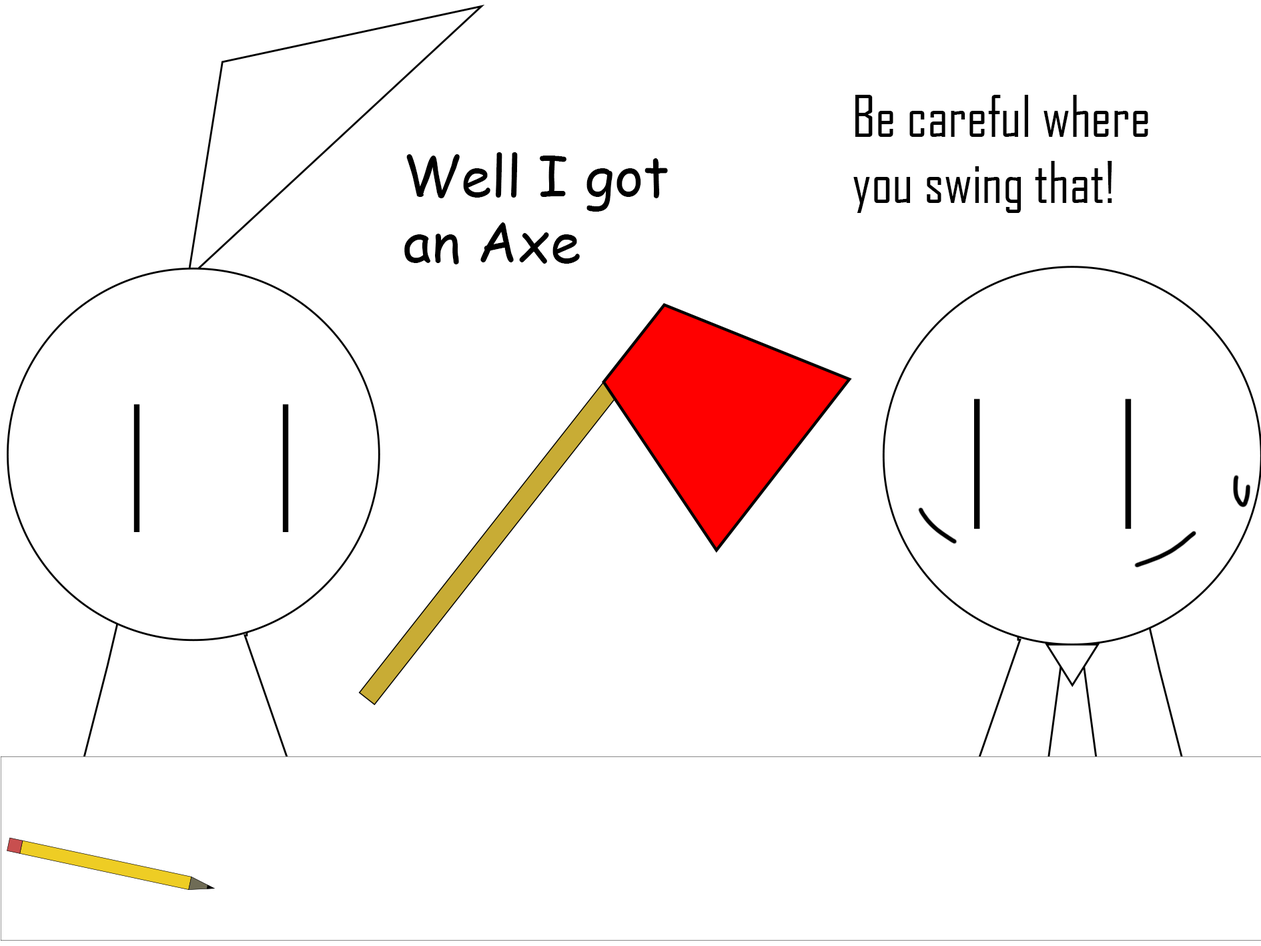
<style>
.page{position:relative;width:1261px;height:946px;background:#ffffff}
.page>*{position:absolute;margin:0}
.t1{font:55.4px "AgencyFB-Reg";color:#000000}
.t2{font:55.4px "ComicSansMS";color:#000000}
</style>
<div class="page">
<p class="t1" style="left:853px;top:95px;width:295px;height:118px">Be careful where you swing that!</p>
<p class="t2" style="left:404px;top:152px;width:264px;height:112px">Well I got an Axe</p>
</div>
